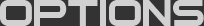
<style>
.page{position:relative;width:204px;height:26px;background:#d1d1d1}
.page>*{position:absolute;margin:0}
.t1{font:50px "Bitsumishi";color:#d1d1d1}
</style>
<div class="page">
<p class="t1" style="left:0px;top:0px;width:204px;height:26px">options</p>
</div>
